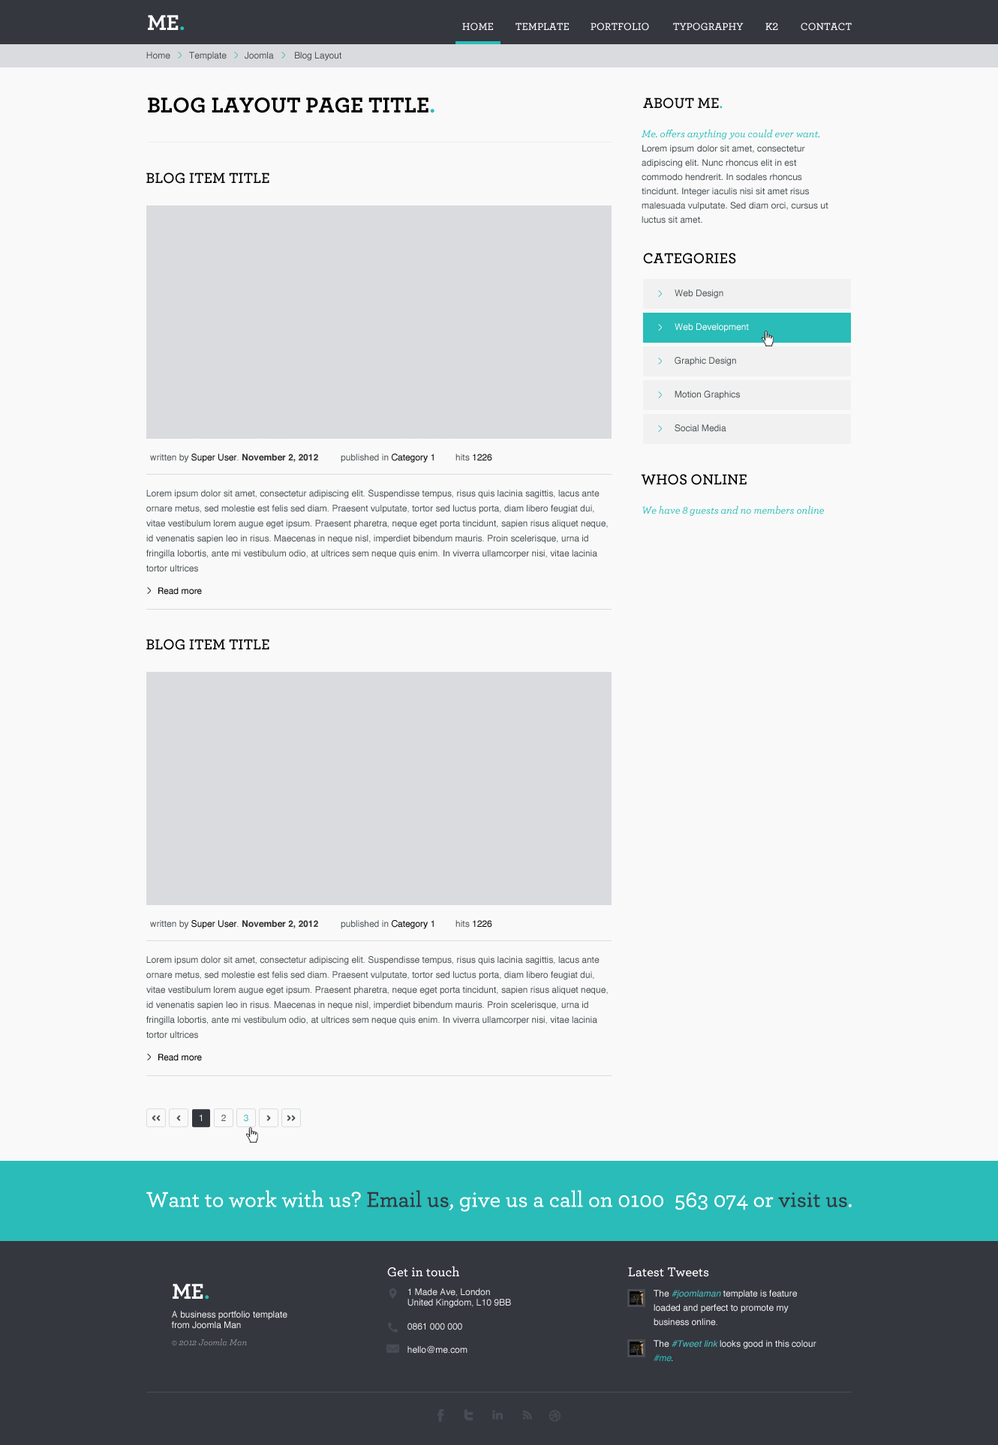
<style>
.page{position:relative;width:998px;height:1445px;background:#f9f9f9}
.page>*{position:absolute;margin:0}
.t1{font:22.5px "Archer-Bold";color:#ffffff;text-transform:uppercase}
.t2{font:22.5px "Archer-Bold";color:#29bcb8;text-transform:uppercase}
.t3{font:10.5px "Archer-Semibold";color:#ffffff;text-transform:uppercase}
.t4{font:9px "Helvetica";color:#4c5357}
.t5{font:22.5px "Archer-Bold";color:#000000;text-transform:uppercase}
.t6{font:15px "Archer-Semibold";color:#000000;text-transform:uppercase}
.t7{font:15px "Archer-Semibold";color:#29bcb8;text-transform:uppercase}
.t8{font:9px/14.3px "HelveticaNeue";color:#4c5357}
.t9{font:10.5px/14.3px "Archer-MediumItalic";color:#29bcb8}
.t10{font:9px "Helvetica";color:#ffffff}
.t11{font:9px "Helvetica-Bold";color:#333333}
.t12{font:9px "Helvetica";color:#000000}
.t13{font:9px "Helvetica";color:#333333}
.t14{font:9px/15px "Helvetica";color:#4c5357}
.t15{font:10.5px "Archer-MediumItalic";color:#29bcb8}
.t16{font:9px "HelveticaNeue";color:#000000}
.t17{font:9px "HelveticaNeue";color:#f2f2f2}
.t18{font:9px "HelveticaNeue";color:#4c5357}
.t19{font:9px "HelveticaNeue"}
.t20{font:22.4px "Archer-Medium";color:#ffffff}
.t21{font:22.4px "Archer-Medium";color:#34373e}
.t22{font:13.5px "Archer-Semibold";color:#ffffff}
.t23{font:9px "Helvetica";color:#f1f1f1}
.t24{font:9px/14.2px "Helvetica";color:#f1f1f1}
.t25{font:9px/14.2px "Helvetica-Oblique";color:#45c4c1}
.t26{font:9px "Archer-MediumItalic";color:#939393}
.t27{font:9px/14.2px "Helvetica-Oblique";color:#29bcb8}
</style>
<div class="page">
<p class="t1" style="left:148px;top:15px;width:36px;height:16px">ME<span class="t2">.</span></p>
<p class="t3" style="left:462px;top:22px;width:31px;height:9px">Home</p>
<p class="t3" style="left:515px;top:22px;width:53px;height:8px">Template</p>
<p class="t3" style="left:590px;top:22px;width:59px;height:9px">Portfolio</p>
<p class="t3" style="left:673px;top:22px;width:70px;height:9px">Typography</p>
<p class="t3" style="left:765px;top:22px;width:13px;height:8px">K2</p>
<p class="t3" style="left:800px;top:22px;width:51px;height:9px">Contact</p>
<p class="t4" style="left:146px;top:52px;width:24px;height:7px">Home</p>
<p class="t4" style="left:189px;top:52px;width:37px;height:9px">Template</p>
<p class="t4" style="left:244px;top:52px;width:30px;height:7px">Joomla</p>
<p class="t4" style="left:295px;top:52px;width:46px;height:9px">Blog Layout</p>
<p class="t5" style="left:148px;top:98px;width:286px;height:15px">Blog Layout Page Title<span class="t2">.</span></p>
<p class="t6" style="left:643px;top:98px;width:79px;height:11px">About Me<span class="t7">.</span></p>
<p class="t8" style="left:641px;top:129px;width:187px;height:95px"><span class="t9">Me. offers anything you could ever want.<br></span>Lorem ipsum dolor sit amet, consectetur adipiscing elit. Nunc rhoncus elit in est commodo hendrerit. In sodales rhoncus tincidunt. Integer iaculis nisi sit amet risus malesuada vulputate. Sed diam orci, cursus ut luctus sit amet.</p>
<p class="t6" style="left:146px;top:172px;width:123px;height:12px">Blog Item Title</p>
<p class="t6" style="left:643px;top:253px;width:93px;height:11px">Categories</p>
<p class="t4" style="left:674px;top:290px;width:49px;height:8px">Web Design</p>
<p class="t10" style="left:674px;top:323px;width:74px;height:9px">Web Development</p>
<p class="t4" style="left:674px;top:357px;width:62px;height:9px">Graphic Design</p>
<p class="t4" style="left:674px;top:391px;width:66px;height:9px">Motion Graphics</p>
<p class="t4" style="left:674px;top:424px;width:52px;height:8px">Social Media</p>
<p class="t11" style="left:150px;top:454px;width:168px;height:9px"><span class="t4">written by </span><span class="t12">Super User</span><span class="t13">. </span>November 2, 2012</p>
<p class="t4" style="left:340px;top:454px;width:94px;height:9px">published in <span class="t12">Category 1</span></p>
<p class="t4" style="left:455px;top:454px;width:37px;height:7px">hits <span class="t12">1226</span></p>
<p class="t6" style="left:640px;top:474px;width:106px;height:11px">Whos Online</p>
<p class="t14" style="left:146px;top:490px;width:462px;height:82px">Lorem ipsum dolor sit amet, consectetur adipiscing elit. Suspendisse tempus, risus quis lacinia sagittis, lacus ante ornare metus, sed molestie est felis sed diam. Praesent vulputate, tortor sed luctus porta, diam libero feugiat dui, vitae vestibulum lorem augue eget ipsum. Praesent pharetra, neque eget porta tincidunt, sapien risus aliquet neque, id venenatis sapien leo in risus. Maecenas in neque nisl, imperdiet bibendum mauris. Proin scelerisque, urna id fringilla lobortis, ante mi vestibulum odio, at ultrices sem neque quis enim. In viverra ullamcorper nisi, vitae lacinia tortor ultrices</p>
<p class="t15" style="left:642px;top:506px;width:182px;height:10px">We have 8 guests and no members online</p>
<p class="t16" style="left:158px;top:587px;width:44px;height:8px">Read more</p>
<p class="t6" style="left:146px;top:639px;width:123px;height:11px">Blog Item Title</p>
<p class="t11" style="left:150px;top:920px;width:168px;height:9px"><span class="t4">written by </span><span class="t12">Super User</span><span class="t13">. </span>November 2, 2012</p>
<p class="t4" style="left:340px;top:920px;width:94px;height:9px">published in <span class="t12">Category 1</span></p>
<p class="t4" style="left:455px;top:920px;width:37px;height:8px">hits <span class="t12">1226</span></p>
<p class="t14" style="left:146px;top:956px;width:462px;height:83px">Lorem ipsum dolor sit amet, consectetur adipiscing elit. Suspendisse tempus, risus quis lacinia sagittis, lacus ante ornare metus, sed molestie est felis sed diam. Praesent vulputate, tortor sed luctus porta, diam libero feugiat dui, vitae vestibulum lorem augue eget ipsum. Praesent pharetra, neque eget porta tincidunt, sapien risus aliquet neque, id venenatis sapien leo in risus. Maecenas in neque nisl, imperdiet bibendum mauris. Proin scelerisque, urna id fringilla lobortis, ante mi vestibulum odio, at ultrices sem neque quis enim. In viverra ullamcorper nisi, vitae lacinia tortor ultrices</p>
<p class="t16" style="left:158px;top:1054px;width:44px;height:7px">Read more</p>
<p class="t17" style="left:199px;top:1114px;width:3px;height:7px">1</p>
<p class="t18" style="left:221px;top:1114px;width:5px;height:7px">2</p>
<p class="t19" style="left:244px;top:1114px;width:4px;height:8px">3</p>
<p class="t20" style="left:146px;top:1190px;width:705px;height:22px">Want to work with us? <span class="t21">Email us</span>, give us a call on 0100  563 074 or <span class="t21">visit us</span>.</p>
<p class="t22" style="left:387px;top:1266px;width:72px;height:11px">Get in touch</p>
<p class="t22" style="left:628px;top:1268px;width:81px;height:9px">Latest Tweets</p>
<p class="t1" style="left:172px;top:1284px;width:37px;height:16px">ME<span class="t2">.</span></p>
<p class="t23" style="left:407px;top:1288px;width:104px;height:20px">1 Made Ave, London<br>United Kingdom, L10 9BB</p>
<p class="t24" style="left:653px;top:1290px;width:143px;height:36px">The <span class="t25">#joomlaman </span>template is feature loaded and perfect to promote my business online.<br>bla bla</p>
<p class="t23" style="left:171px;top:1311px;width:116px;height:18px">A business portfolio template<br>from Joomla Man</p>
<p class="t23" style="left:407px;top:1323px;width:55px;height:7px">0861 000 000</p>
<p class="t26" style="left:172px;top:1339px;width:75px;height:7px">© 2012 Joomla Man</p>
<p class="t23" style="left:407px;top:1346px;width:60px;height:8px">hello@me.com</p>
<p class="t24" style="left:653px;top:1340px;width:163px;height:22px">The <span class="t25">#Tweet link </span>looks good in this colour <span class="t27">#me</span>.</p>
</div>
